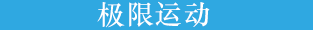
<style>
.page{position:relative;width:313px;height:30px;background:#2fa8e1}
.page>*{position:absolute;margin:0}
.t1{font:27.3px "STZhongsong";letter-spacing:0.05em;color:#ffffff}
</style>
<div class="page">
<p class="t1" style="left:97px;top:1px;width:113px;height:27px">极限运动</p>
</div>
